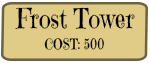
<style>
.page{position:relative;width:150px;height:63px;background:#e0cc87}
.page>*{position:absolute;margin:0}
.t1{font:27.4px "EmilysCandy-Regular";color:#000000;scale:0.83 1}
.t2{font:14.5px "EmilysCandy-Regular";color:#000000;scale:0.83 1}
</style>
<div class="page">
<p class="t1" style="left:15px;top:7px;width:120px;height:22px">Frost Tower</p>
<p class="t2" style="left:44px;top:37px;width:60px;height:13px">COST: 500</p>
</div>
